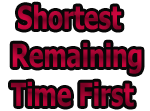
<style>
.page{position:relative;width:150px;height:111px;background:#ffffff}
.page>*{position:absolute;margin:0}
.t1{font:32px "Tahoma-Bold";scale:0.77 1}
.t2{font:43.9px "CourierNewPS-BoldMT";scale:0.77 1}
</style>
<div class="page">
<p class="t1" style="left:11px;top:4px;width:131px;height:103px"><span class="t2"> </span>Shortest <br>  Remaining<br>  Time First</p>
</div>
